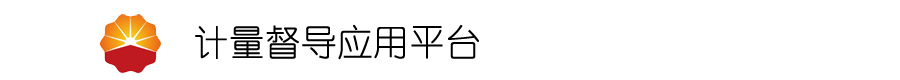
<style>
.page{position:relative;width:900px;height:80px;background:#ffffff}
.page>*{position:absolute;margin:0}
.t1{font:36px "YouYuan";color:#000000}
</style>
<div class="page">
<p class="t1" style="left:195px;top:24px;width:284px;height:36px">计量督导应用平台</p>
</div>
